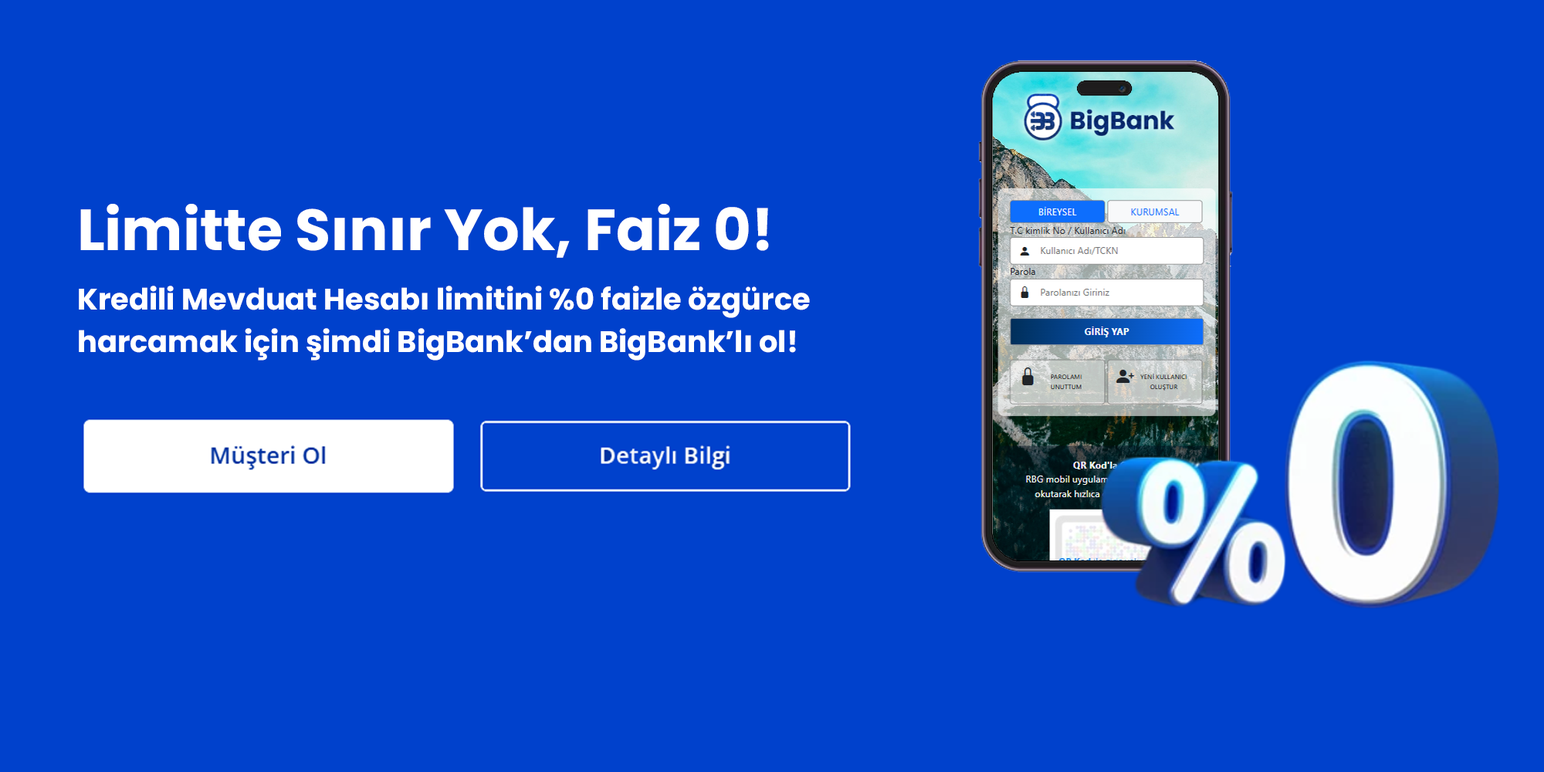
<style>
.page{position:relative;width:1544px;height:772px;background:#0041cc}
.page>*{position:absolute;margin:0}
.t1{font:57.9px "Poppins-Bold";color:#ffffff}
.t2{font:29.6px/42.5px "Poppins-Bold";color:#ffffff}
</style>
<div class="page">
<p class="t1" style="left:80px;top:204px;width:689px;height:54px">Limitte Sınır Yok, Faiz 0!</p>
<p class="t2" style="left:79px;top:286px;width:731px;height:75px">Kredili Mevduat Hesabı limitini %0 faizle özgürce harcamak için şimdi BigBank’dan BigBank’lı ol!</p>
</div>
